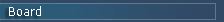
<style>
.page{position:relative;width:224px;height:22px;background:#314965}
.page>*{position:absolute;margin:0}
.t1{font:12.1px "Verdana";color:#ffffff;scale:0.91 1}
</style>
<div class="page">
<p class="t1" style="left:9px;top:6px;width:32px;height:10px">Board</p>
</div>
